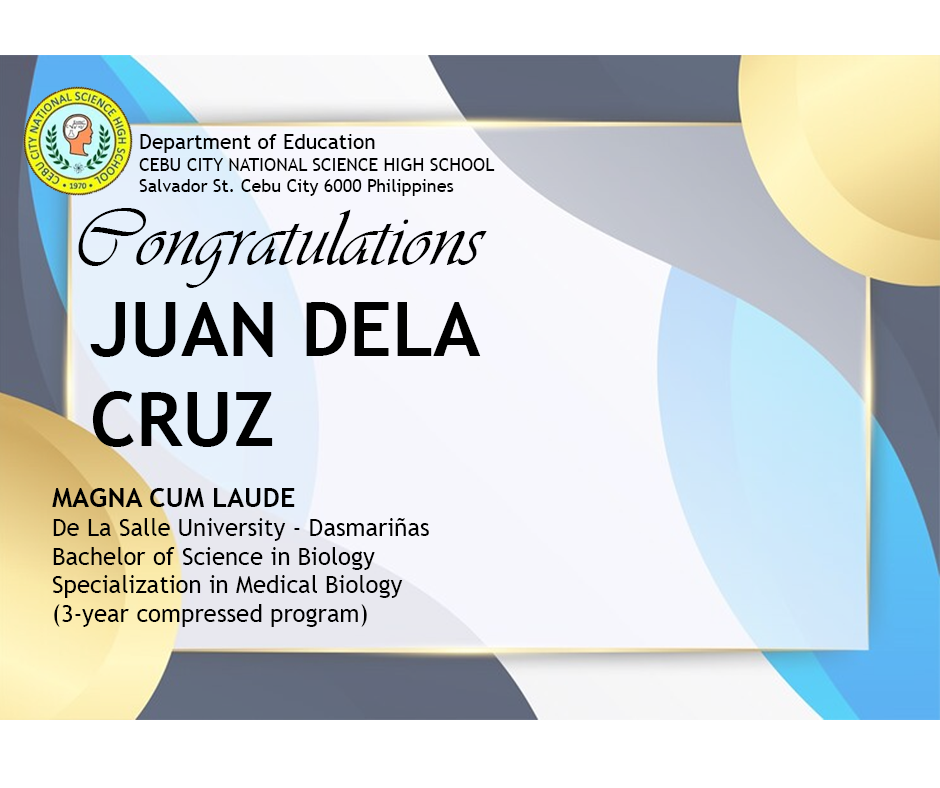
<style>
.page{position:relative;width:940px;height:788px}
.page>*{position:absolute;margin:0}
.t1{font:18px "TrebuchetMS";color:#000000}
.t2{font:21px "TrebuchetMS";color:#000000}
.t3{font:83px "Vivaldii";color:#000000}
.t4{font:75px "TrebuchetMS-Bold";color:#000000}
.t5{font:24px "TrebuchetMS";color:#000000}
.t6{font:27px "TrebuchetMS-Bold";color:#000000}
</style>
<div class="page">
<p class="t1" style="left:139px;top:134px;width:356px;height:62px"><span class="t2">Department of Education<br></span>CEBU CITY NATIONAL SCIENCE HIGH SCHOOL<br>Salvador St. Cebu City 6000 Philippines</p>
<p class="t3" style="left:78px;top:208px;width:409px;height:80px">Congratulations</p>
<p class="t4" style="left:90px;top:302px;width:391px;height:145px">JUAN DELA<br>CRUZ</p>
<p class="t5" style="left:52px;top:488px;width:377px;height:139px"><span class="t6">MAGNA CUM LAUDE<br></span>De La Salle University - Dasmariñas<br>Bachelor of Science in Biology<br>Specialization in Medical Biology<br>(3-year compressed program)</p>
</div>
